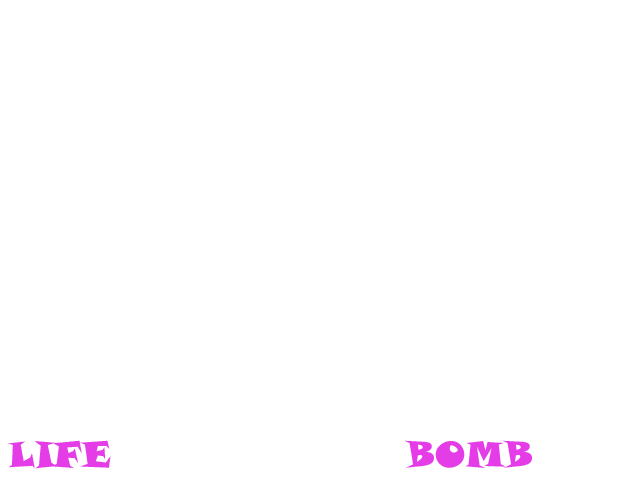
<style>
.page{position:relative;width:640px;height:480px;background:#ffffff}
.page>*{position:absolute;margin:0}
.t1{font:36px "SnapITC-Regular";color:#e43ce6}
</style>
<div class="page">
<p class="t1" style="left:8px;top:440px;width:524px;height:29px">LIFE                   BOMB</p>
</div>
